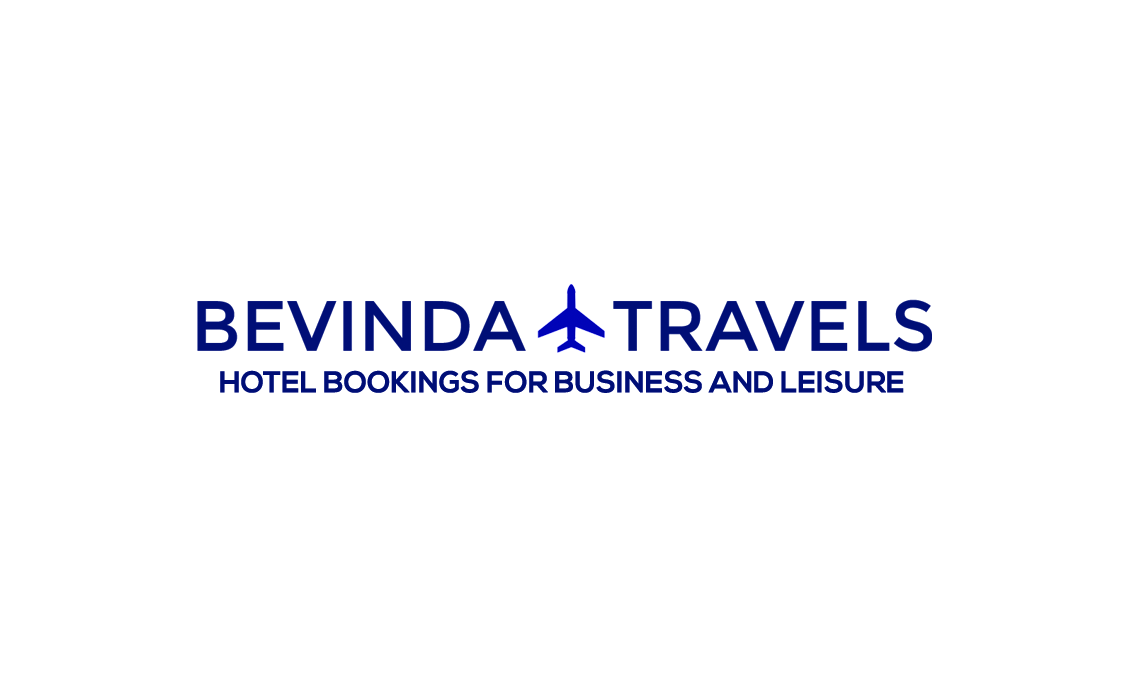
<style>
.page{position:relative;width:1125px;height:675px;background:#ffffff}
.page>*{position:absolute;margin:0}
.t1{font:29.8px "NexaBold";color:#000e77}
.t2{font:29.8px "NexaBold";color:#0004b7}
</style>
<div class="page">
<p class="t1" style="left:220px;top:370px;width:684px;height:23px">HOTEL BOOKINGS FOR BUSINESS AND LEISURE <span class="t2">TRAVELS</span></p>
</div>
